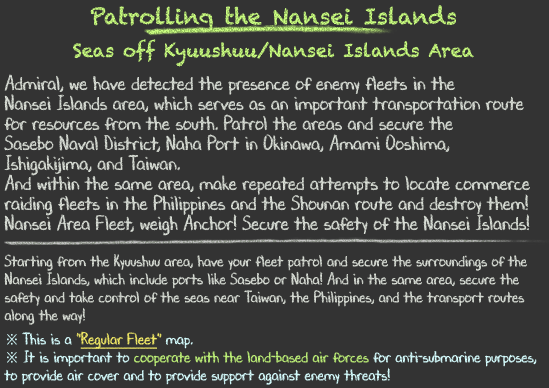
<style>
.page{position:relative;width:549px;height:388px;background:#333333}
.page>*{position:absolute;margin:0}
.t1{font:18px/36px "Chalkduster"}
.t2{font:22px/36px "Chalkduster"}
.t3{font:20px/20px "DJBChalkItUp";color:#d9ded6;scale:0.9 1}
.t4{font:16px/18px "DJBChalkItUp";color:#d9ded6;scale:0.9 1}
.t5{font:16px/24px "DJBChalkItUp";color:#d9ded6;scale:0.9 1}
.t6{font:16px/18px "TimesNewRomanPSMT";color:#d7feff;scale:0.9 1}
.t7{font:16px/18px "DJBChalkItUp";color:#d7feff;scale:0.9 1}
.t8{font:16px/18px "DJBChalkItUp";color:#f5ed68;scale:0.9 1}
.t9{font:16px/18px "DJBChalkItUp";color:#f5ed68;text-decoration:underline;scale:0.9 1}
.t10{font:16px/18px "DJBChalkItUp";color:#bdef78;scale:0.9 1}
</style>
<div class="page">
<p class="t1" style="left:73px;top:5px;width:401px;height:62px;text-align:center"><span class="t2">Patrolling the Nansei Islands<br></span>Seas off Kyuushuu/Nansei Islands Area</p>
<p class="t3" style="left:4px;top:74px;width:533px;height:311px">Admiral, we have detected the presence of enemy fleets in the<br>Nansei Islands area, which serves as an important transportation route<br>for resources from the south. Patrol the areas and secure the<br>Sasebo Naval District, Naha Port in Okinawa, Amami Ooshima,<br>Ishigakijima, and Taiwan.<br>And within the same area, make repeated attempts to locate commerce<br>raiding fleets in the Philippines and the Shounan route and destroy them!<br>Nansei Area Fleet, weigh Anchor! Secure the safety of the Nansei Islands! <br><br><span class="t4">Starting from the Kyuushuu area, have your fleet patrol and secure the surroundings of the<br>Nansei Islands, which include ports like Sasebo or Naha! And in the same area, secure the<br>safety and take control of the seas near Taiwan, the Philippines, and the transport routes<br></span><span class="t5">along the way!<br></span><span class="t6">※ </span><span class="t7">This is a </span><span class="t8">"</span><span class="t9">Regular Fleet</span><span class="t8">"</span><span class="t7"> map.<br></span><span class="t6">※</span><span class="t7"> It is important to </span><span class="t10">cooperate with the land-based air forces</span><span class="t7"> for anti-submarine purposes,<br>to provide air cover and to provide support against enemy threats!</span></p>
</div>
